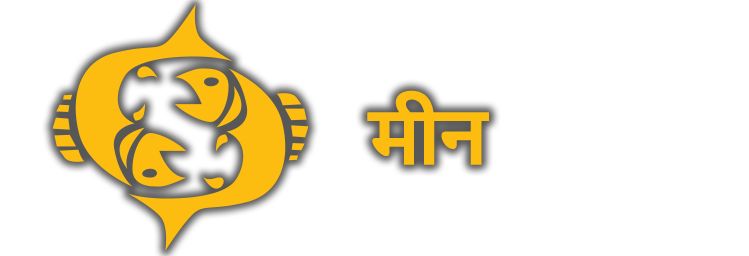
<style>
.page{position:relative;width:749px;height:256px;background:#ffffff}
.page>*{position:absolute;margin:0}
.t1{font:70.8px "NirmalaUI-Bold";letter-spacing:-0.05em;color:#fcbc10;text-transform:uppercase;font-weight:bold}
</style>
<div class="page">
<p class="t1" style="left:367px;top:90px;width:122px;height:75px">मीन</p>
</div>
